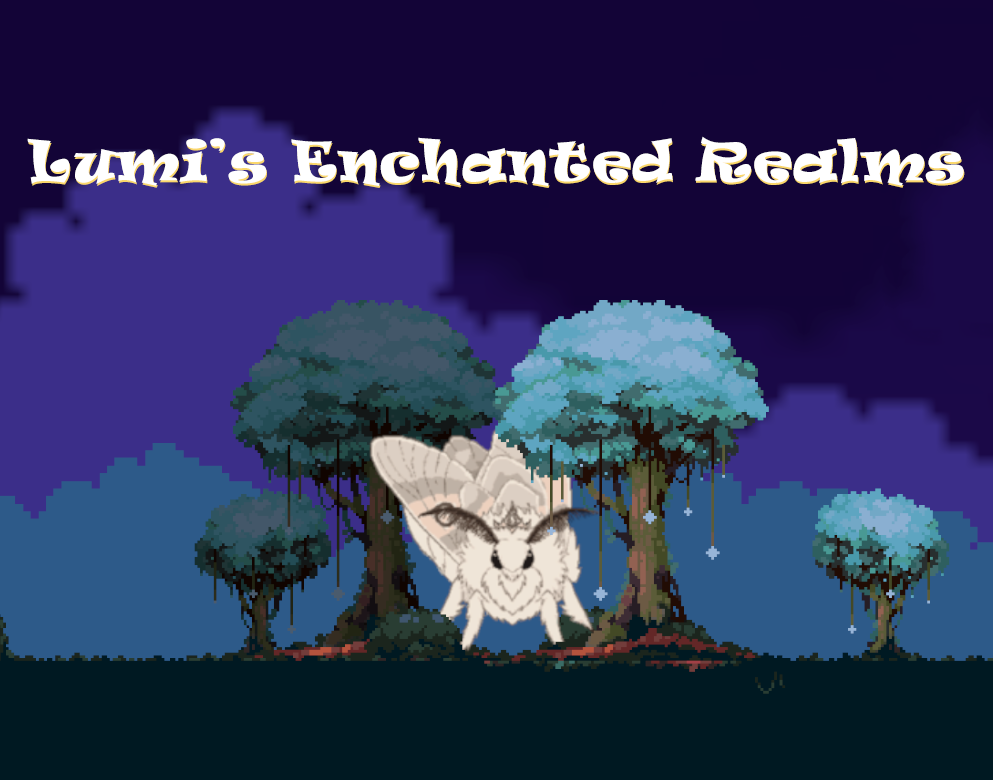
<style>
.page{position:relative;width:993px;height:780px;background:#130437}
.page>*{position:absolute;margin:0}
.t1{font:52.9px "Ravie";letter-spacing:0.025em;color:#ffffff}
</style>
<div class="page">
<p class="t1" style="left:27px;top:136px;width:937px;height:50px">Lumi’s Enchanted Realms</p>
<p class="t1" style="left:28px;top:138px;width:937px;height:50px">Lumi’s Enchanted Realms</p>
</div>
